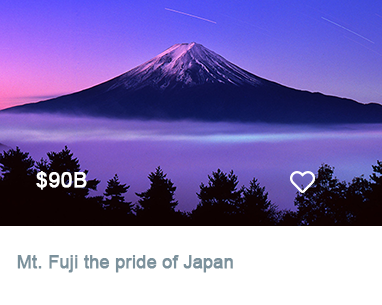
<style>
.page{position:relative;width:382px;height:305px;background:#ffffff}
.page>*{position:absolute;margin:0}
.t1{font:21.2px "ArialMT";color:#ffffff;font-weight:bold}
.t2{font:17.7px "ArialMT";color:#7b919c;font-weight:bold}
</style>
<div class="page">
<p class="t1" style="left:36px;top:171px;width:51px;height:19px">$90B</p>
<p class="t2" style="left:17px;top:255px;width:216px;height:18px">Mt. Fuji the pride of Japan</p>
</div>
